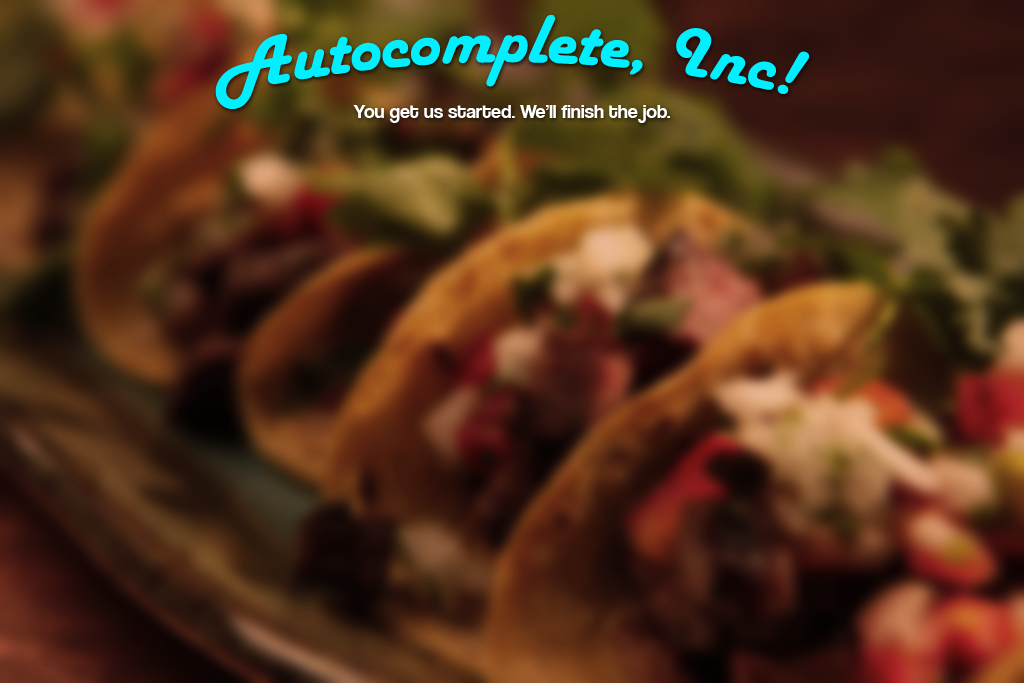
<style>
.page{position:relative;width:1024px;height:683px}
.page>*{position:absolute;margin:0}
.t1{font:72px "HarlowSolid";color:#00f0ff}
.t2{font:20px "CoolveticaRg-Regular";color:#fefefe}
</style>
<div class="page">
<p class="t1" style="left:215px;top:14px;width:595px;height:95px">Autocomplete, Inc!</p>
<p class="t2" style="left:353px;top:105px;width:317px;height:18px">You get us started. We’ll finish the job.</p>
</div>
